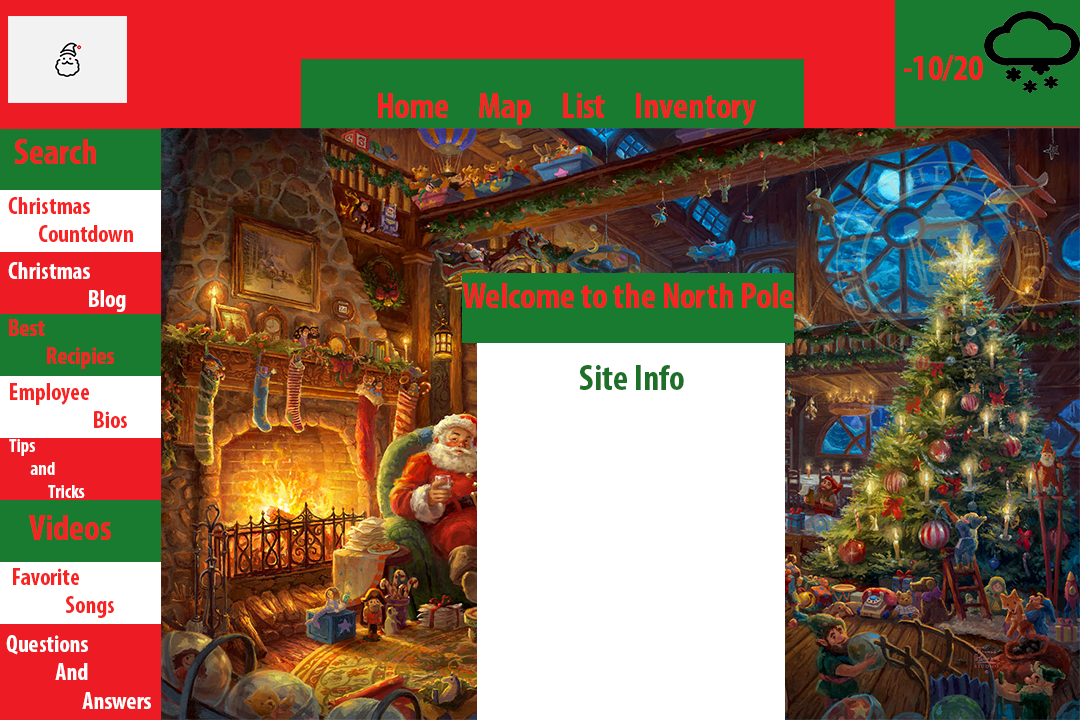
<style>
.page{position:relative;width:1080px;height:720px}
.page>*{position:absolute;margin:0}
.t1{font:36px "MyriadPro-BoldCond";color:#f82323}
.t2{font:24px "MyriadPro-BoldCond";color:#f82323}
.t3{font:24px "MyriadPro-BoldCond";color:#fefefe}
.t4{font:36px "MyriadPro-BoldCond";color:#1e7028}
.t5{font:19px "MyriadPro-BoldCond";color:#fefefe}
</style>
<div class="page">
<p class="t1" style="left:904px;top:55px;width:79px;height:26px">-10/20</p>
<p class="t1" style="left:378px;top:93px;width:378px;height:33px">Home     Map     List     Inventory</p>
<p class="t1" style="left:14px;top:139px;width:82px;height:25px">Search</p>
<p class="t2" style="left:8px;top:197px;width:125px;height:45px">Christmas<br>        Countdown</p>
<p class="t3" style="left:8px;top:262px;width:118px;height:50px">Christmas <br>                     Blog</p>
<p class="t1" style="left:462px;top:283px;width:331px;height:25px">Welcome to the North Pole</p>
<p class="t2" style="left:9px;top:319px;width:105px;height:50px">Best <br>          Recipies</p>
<p class="t4" style="left:579px;top:365px;width:105px;height:25px">Site Info</p>
<p class="t2" style="left:10px;top:383px;width:117px;height:45px">Employee<br>                      Bios</p>
<p class="t5" style="left:9px;top:439px;width:76px;height:59px">Tips <br>       and <br>             Tricks</p>
<p class="t1" style="left:29px;top:515px;width:82px;height:25px">Videos</p>
<p class="t2" style="left:13px;top:568px;width:101px;height:50px">Favorite<br>              Songs</p>
<p class="t3" style="left:6px;top:635px;width:145px;height:74px">Questions <br>             And<br>                    Answers</p>
</div>
